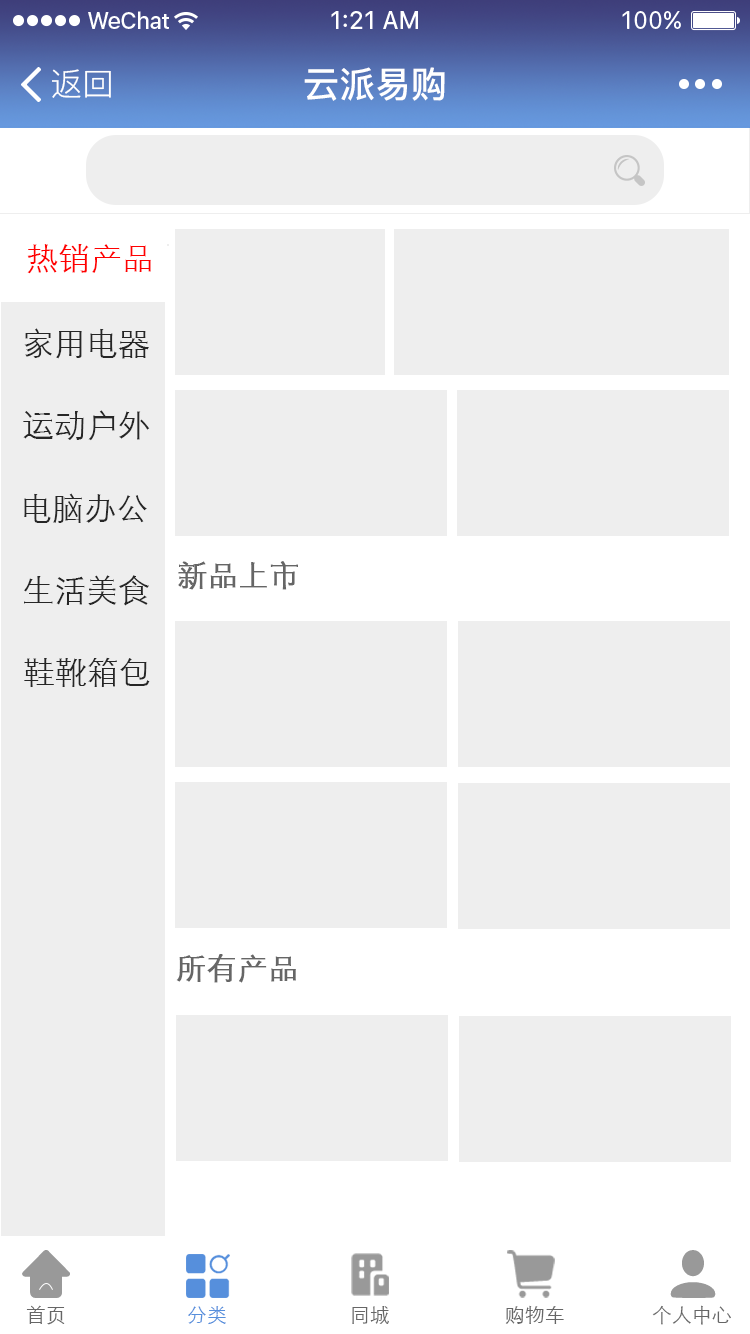
<style>
.page{position:relative;width:750px;height:1334px;background:#eeeeee}
.page>*{position:absolute;margin:0}
.t1{font:32px "PingFang-SC-Regular";color:#ffffff}
.t2{font:36px "PingFang-SC-Bold";color:#ffffff}
.t3{font:32px "STXihei";color:#ff0101}
.t4{font:32px "STXihei";color:#262626}
.t5{font:30px "STXihei";color:#666666;font-weight:bold}
.t6{font:20px "STXihei";color:#666666}
.t7{font:20px "STXihei";color:#568fdc}
</style>
<div class="page">
<p class="t1" style="left:52px;top:69px;width:59px;height:29px">返回</p>
<p class="t2" style="left:304px;top:67px;width:141px;height:34px">云派易购</p>
<p class="t3" style="left:27px;top:244px;width:124px;height:30px">热销产品</p>
<p class="t4" style="left:24px;top:328px;width:125px;height:31px">家用电器</p>
<p class="t4" style="left:23px;top:410px;width:127px;height:31px">运动户外</p>
<p class="t4" style="left:24px;top:493px;width:123px;height:30px">电脑办公</p>
<p class="t5" style="left:178px;top:561px;width:120px;height:29px">新品上市</p>
<p class="t4" style="left:24px;top:575px;width:125px;height:31px">生活美食</p>
<p class="t4" style="left:24px;top:657px;width:126px;height:30px">鞋靴箱包</p>
<p class="t5" style="left:176px;top:954px;width:120px;height:29px">所有产品</p>
<p class="t6" style="left:26px;top:1305px;width:39px;height:20px">首页</p>
<p class="t7" style="left:188px;top:1306px;width:38px;height:19px">分类</p>
<p class="t6" style="left:352px;top:1306px;width:37px;height:18px">同城</p>
<p class="t6" style="left:505px;top:1305px;width:59px;height:19px">购物车</p>
<p class="t6" style="left:652px;top:1305px;width:79px;height:20px">个人中心</p>
</div>
